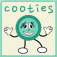
<style>
.page{position:relative;width:57px;height:57px;background:#f4f1dd}
.page>*{position:absolute;margin:0}
.t1{font:16.7px "NanumPen";letter-spacing:0.075em;color:#2a9b7e}
</style>
<div class="page">
<p class="t1" style="left:4px;top:4px;width:49px;height:10px">cooties</p>
</div>
